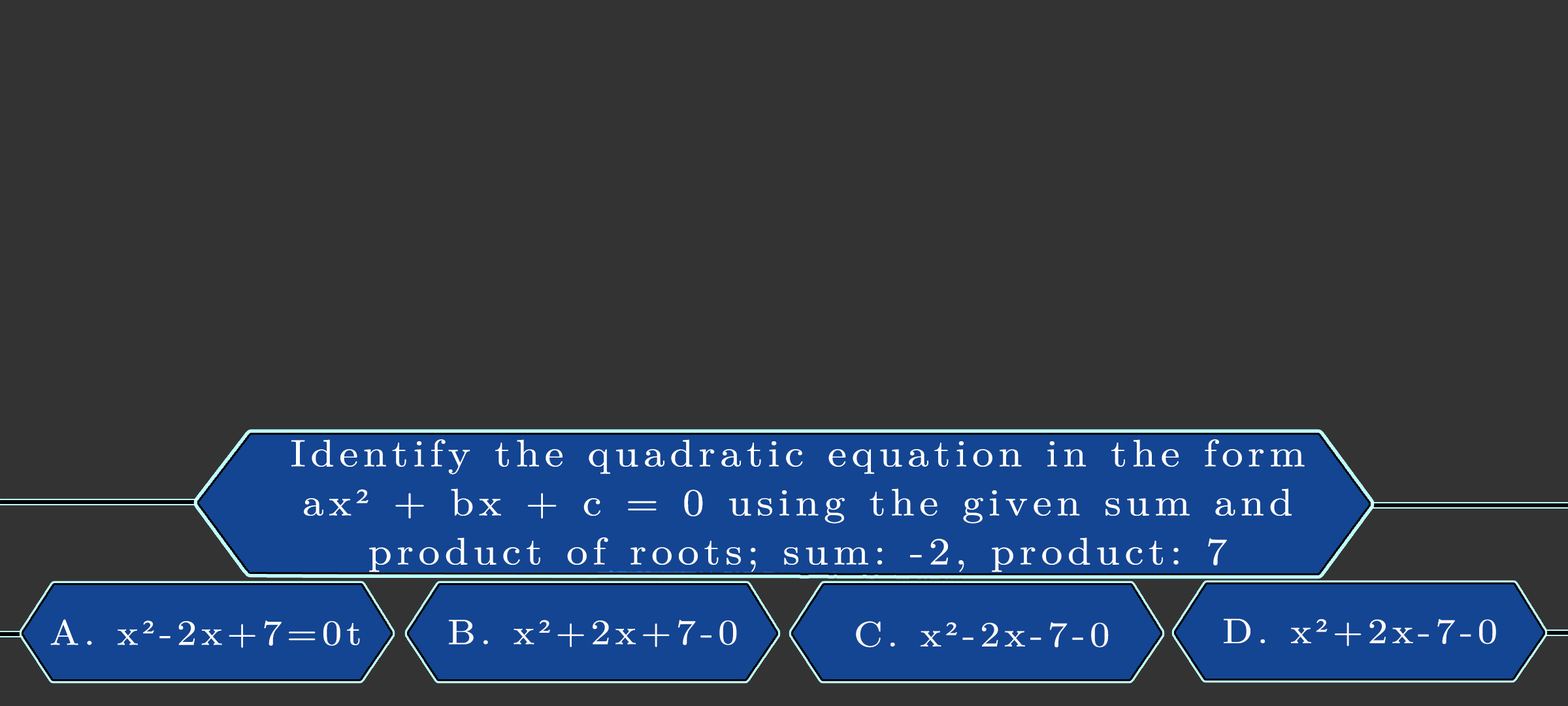
<style>
.page{position:relative;width:1568px;height:706px;background:#333333}
.page>*{position:absolute;margin:0}
.t1{font:38.1px/49px "LatinModernMath-Regular";letter-spacing:0.115em;color:#ffffff;scale:1.12 1}
.t2{font:38.1px/49px "TimesNewRomanPSMT";letter-spacing:0.115em;color:#ffffff;scale:1.12 1}
.t3{font:35.4px "LatinModernMath-Regular";letter-spacing:0.115em;color:#fffefe;scale:1.12 1}
.t4{font:35.4px "LatinModernMath-Regular";letter-spacing:0.115em;color:#fffefe;text-transform:uppercase;scale:1.12 1}
.t5{font:35.4px "TimesNewRomanPSMT";letter-spacing:0.115em;color:#fffefe;scale:1.12 1}
.t6{font:35.4px "LatinModernMath-Regular";letter-spacing:0.115em;color:#fdf9f9;scale:1.12 1}
.t7{font:35.4px "LatinModernMath-Regular";letter-spacing:0.115em;color:#fdf9f9;text-transform:uppercase;scale:1.12 1}
.t8{font:35.4px "TimesNewRomanPSMT";letter-spacing:0.115em;color:#fdf9f9;scale:1.12 1}
.t9{font:35.4px "LatinModernMath-Regular";letter-spacing:0.115em;color:#fcf7f7;scale:1.12 1}
.t10{font:35.4px "LatinModernMath-Regular";letter-spacing:0.115em;color:#fcf7f7;text-transform:uppercase;scale:1.12 1}
.t11{font:35.4px "TimesNewRomanPSMT";letter-spacing:0.115em;color:#fcf7f7;scale:1.12 1}
.t12{font:35.4px "LatinModernMath-Regular";letter-spacing:0.115em;color:#fbf8f8;scale:1.12 1}
.t13{font:35.4px "LatinModernMath-Regular";letter-spacing:0.115em;color:#fbf8f8;text-transform:uppercase;scale:1.12 1}
.t14{font:35.4px "TimesNewRomanPSMT";letter-spacing:0.115em;color:#fbf8f8;scale:1.12 1}
</style>
<div class="page">
<p class="t1" style="left:291px;top:439px;width:1014px;height:133px;text-align:center">Identify the quadratic equation in the form<br>ax<span class="t2">²</span> + bx + c = 0 using the given sum and<br>product of roots; sum: -2, product: 7</p>
<p class="t3" style="left:50px;top:619px;width:310px;height:28px"><span class="t4">a. </span>x<span class="t5">²</span>-2x+7=0t</p>
<p class="t6" style="left:449px;top:619px;width:288px;height:28px"><span class="t7">b. </span>x<span class="t8">²</span>+2x+7-0</p>
<p class="t9" style="left:856px;top:621px;width:253px;height:26px"><span class="t10">c. </span>x<span class="t11">²</span>-2x-7-0</p>
<p class="t12" style="left:1224px;top:618px;width:272px;height:28px"><span class="t13">d. </span>x<span class="t14">²</span>+2x-7-0</p>
</div>
